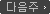
<style>
.page{position:relative;width:50px;height:14px;background:#404040}
.page>*{position:absolute;margin:0}
.t1{font:11px "Dotum";color:#bababa}
</style>
<div class="page">
<p class="t1" style="left:7px;top:2px;width:31px;height:10px">다음주</p>
</div>
